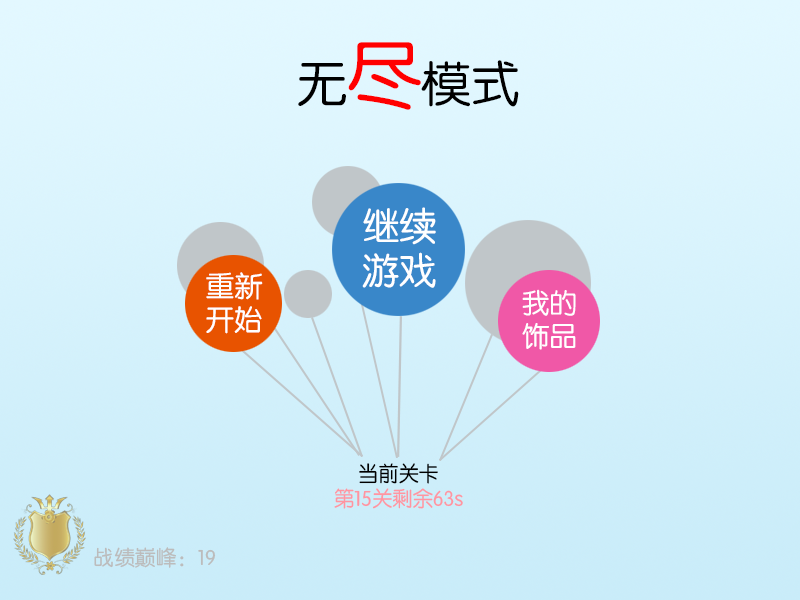
<style>
.page{position:relative;width:800px;height:600px}
.page>*{position:absolute;margin:0}
.t1{font:49.2px "FZY3JW--GB1-0";color:#000000}
.t2{font:73.8px "FZY3JW--GB1-0";color:#ff0000}
.t3{font:37.6px "FZY3JW--GB1-0";color:#ffffff}
.t4{font:28.7px "FZY3JW--GB1-0";color:#ffffff}
.t5{font:27.9px "FZY3JW--GB1-0";color:#ffffff}
.t6{font:21.2px "FZY3JW--GB1-0";color:#ff95a1;scale:0.96 1}
.t7{font:21.2px "FZY3JW--GB1-0";color:#000000;scale:0.96 1}
.t8{font:21px "FZY3JW--GB1-0";color:#bcbcbc}
</style>
<div class="page">
<p class="t1" style="left:298px;top:42px;width:221px;height:68px">无<span class="t2">尽</span>模式</p>
<p class="t3" style="left:362px;top:207px;width:74px;height:81px">继续<br>游戏</p>
<p class="t4" style="left:206px;top:272px;width:57px;height:62px">重新<br>开始</p>
<p class="t5" style="left:522px;top:289px;width:54px;height:61px">我的<br>饰品</p>
<p class="t6" style="left:334px;top:463px;width:129px;height:46px;text-align:center"><span class="t7">当前关卡<br></span>第15关剩余63s</p>
<p class="t8" style="left:94px;top:547px;width:122px;height:21px">战绩巅峰：19</p>
</div>
